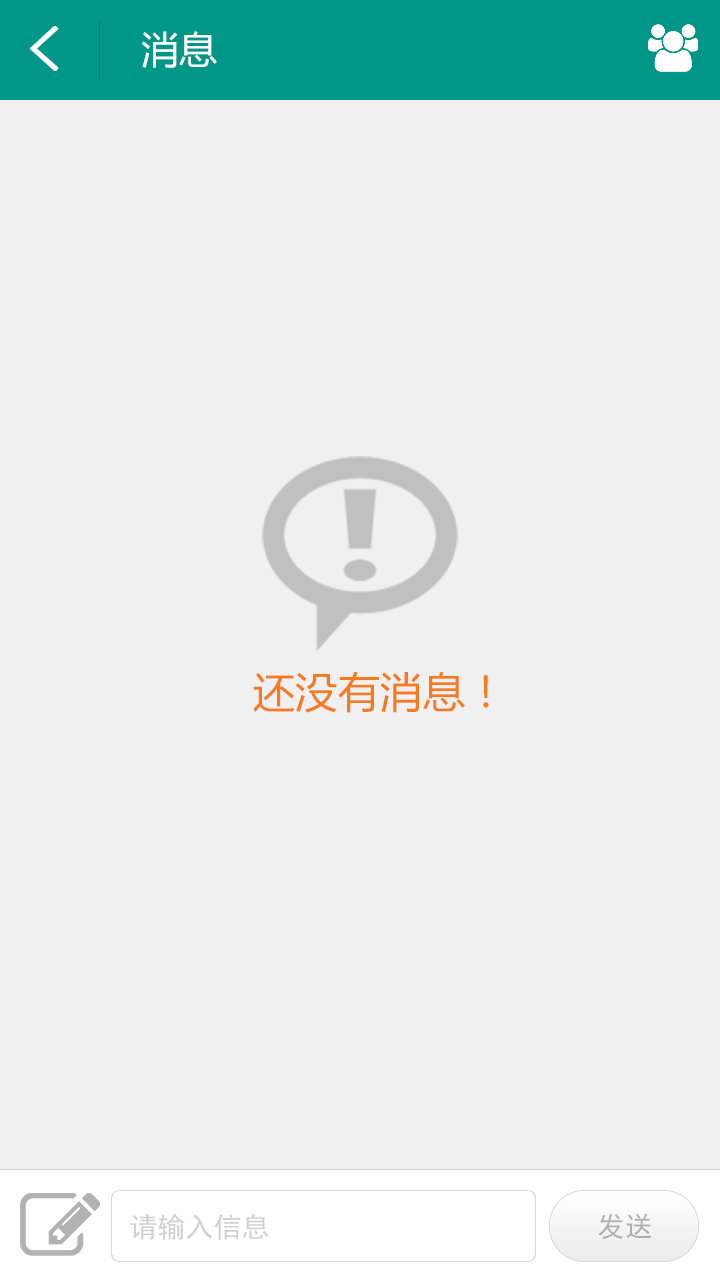
<style>
.page{position:relative;width:720px;height:1280px;background:#f0f0f0}
.page>*{position:absolute;margin:0}
.t1{font:62px "SimHei";color:#ffffff;font-weight:bold}
.t2{font:38px "MicrosoftYaHei";letter-spacing:0.01em;color:#ffffff}
.t3{font:42px "MicrosoftYaHei";letter-spacing:0.01em;color:#f67b20}
.t4{font:28px "SimHei";color:#d0d0d0}
.t5{font:28px "SimHei";color:#b0b0b0}
</style>
<div class="page">
<p class="t1" style="left:30px;top:26px;width:29px;height:45px">&lt;</p>
<p class="t2" style="left:141px;top:31px;width:76px;height:37px">消息</p>
<p class="t3" style="left:253px;top:671px;width:236px;height:42px">还没有消息！</p>
<p class="t4" style="left:130px;top:1213px;width:139px;height:27px">请输入信息</p>
<p class="t5" style="left:598px;top:1213px;width:54px;height:26px">发送</p>
</div>
